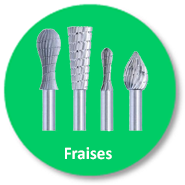
<style>
.page{position:relative;width:185px;height:185px;background:#00cc66}
.page>*{position:absolute;margin:0}
.t1{font:17.8px "Calibri-Bold";color:#ffffff;scale:0.96 1}
</style>
<div class="page">
<p class="t1" style="left:65px;top:147px;width:47px;height:13px">Fraises</p>
</div>
